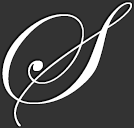
<style>
.page{position:relative;width:134px;height:128px;background:#333333}
.page>*{position:absolute;margin:0}
.t1{font:150px "EdwardianScriptITC";color:#ffffff}
</style>
<div class="page">
<p class="t1" style="left:2px;top:2px;width:130px;height:125px">S</p>
</div>
